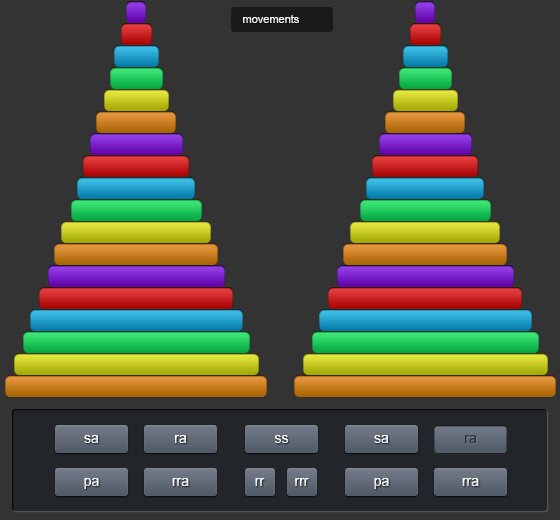
<style>
.page{position:relative;width:560px;height:520px;background:#333333}
.page>*{position:absolute;margin:0}
.t1{font:11px "ArialMT";color:#ffffff}
.t2{font:14px "ArialMT";color:#ffffff}
.t3{font:14px "ArialMT";color:#28313a}
</style>
<div class="page">
<p class="t1" style="left:243px;top:15px;width:56px;height:8px">movements</p>
<p class="t2" style="left:84px;top:435px;width:15px;height:8px">sa</p>
<p class="t2" style="left:175px;top:435px;width:12px;height:8px">ra</p>
<p class="t2" style="left:274px;top:435px;width:15px;height:8px">ss</p>
<p class="t2" style="left:374px;top:435px;width:15px;height:8px">sa</p>
<p class="t3" style="left:465px;top:435px;width:12px;height:8px">ra</p>
<p class="t2" style="left:84px;top:478px;width:15px;height:11px">pa</p>
<p class="t2" style="left:172px;top:478px;width:17px;height:8px">rra</p>
<p class="t2" style="left:255px;top:478px;width:10px;height:8px">rr</p>
<p class="t2" style="left:295px;top:478px;width:14px;height:8px">rrr</p>
<p class="t2" style="left:374px;top:478px;width:15px;height:11px">pa</p>
<p class="t2" style="left:462px;top:478px;width:17px;height:8px">rra</p>
</div>
